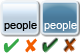
<style>
.page{position:relative;width:80px;height:53px}
.page>*{position:absolute;margin:0}
.t1{font:11px "ArialMT";color:#000000}
.t2{font:11px "ArialMT";color:#fefefe}
.t3{font:24px "OpenSymbol";color:#37a848}
.t4{font:24px "OpenSymbol";color:#f25d00}
.t5{font:24px "OpenSymbol"}
</style>
<div class="page">
<p class="t1" style="left:4px;top:21px;width:33px;height:10px">people</p>
<p class="t2" style="left:44px;top:21px;width:33px;height:10px">people</p>
<p class="t3" style="left:3px;top:38px;width:16px;height:15px">✔</p>
<p class="t4" style="left:25px;top:38px;width:12px;height:15px">✘</p>
<p class="t5" style="left:42px;top:38px;width:16px;height:15px">✔</p>
<p class="t5" style="left:64px;top:38px;width:12px;height:15px">✘</p>
</div>
